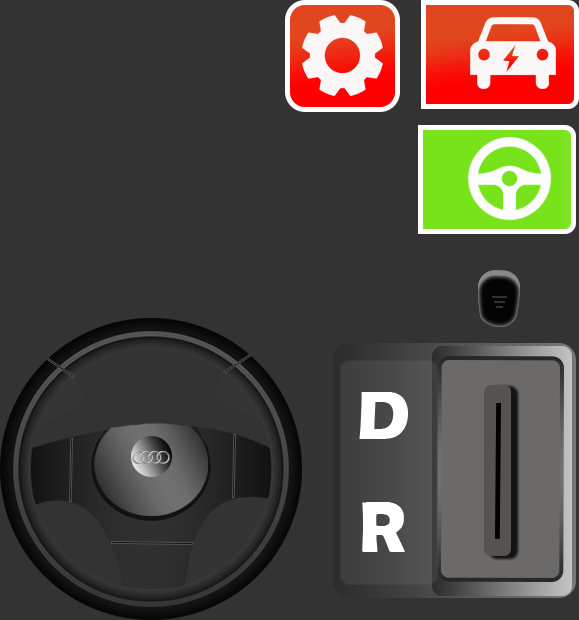
<style>
.page{position:relative;width:579px;height:620px;background:#333333}
.page>*{position:absolute;margin:0}
.t1{font:70px "ErasITC-Bold";letter-spacing:-0.005em;color:#ffffff}
.t2{font:73.1px "BerlinSansFBDemi-Bold";letter-spacing:-0.005em;color:#ffffff}
</style>
<div class="page">
<p class="t1" style="left:359px;top:392px;width:49px;height:47px">D</p>
<p class="t2" style="left:362px;top:502px;width:43px;height:50px">R</p>
</div>
